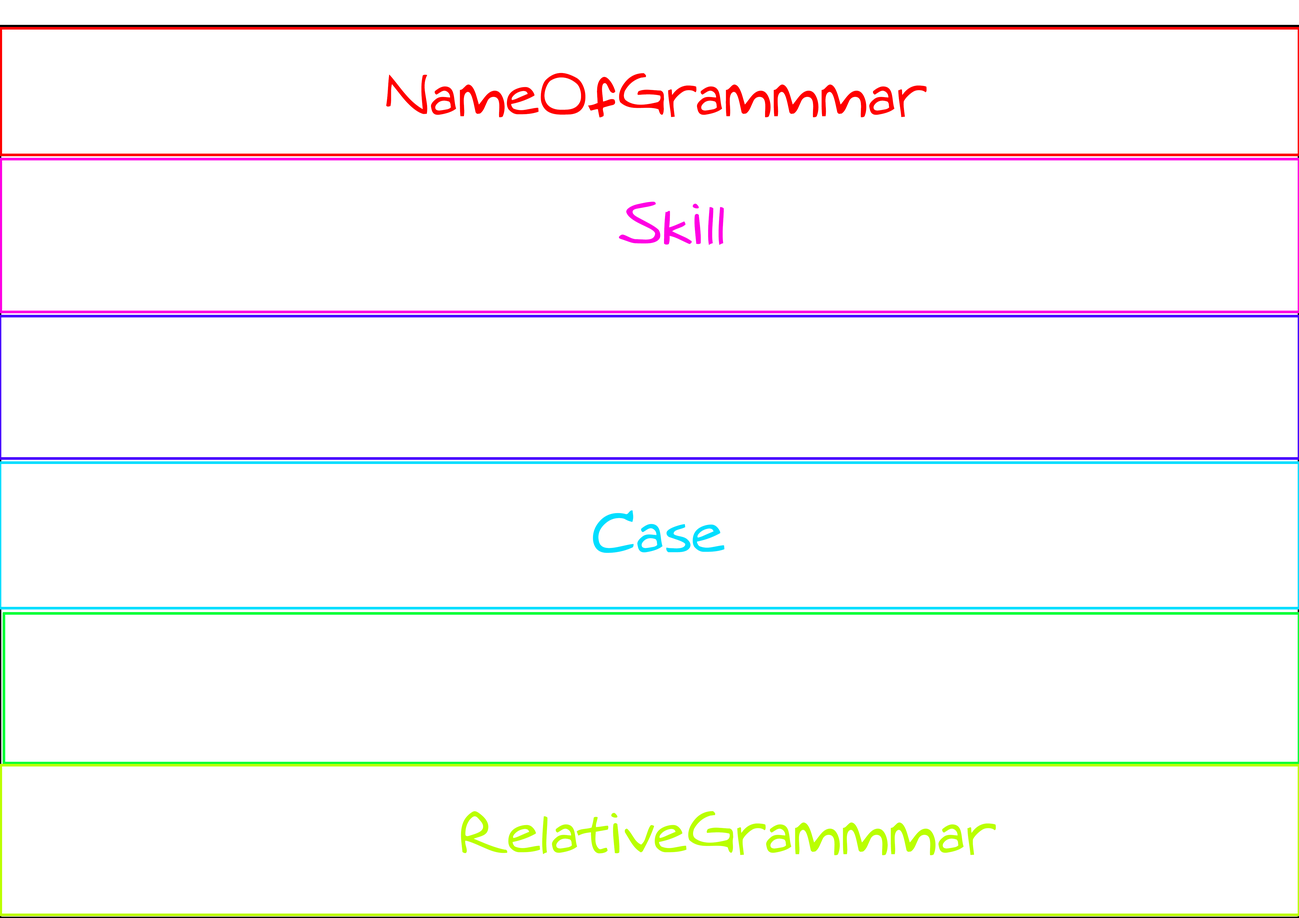
<style>
.page{position:relative;width:1299px;height:918px;background:#ffffff}
.page>*{position:absolute;margin:0}
.t1{font:54.5px "MTOaugie-Regular";color:#ff0000}
.t2{font:54.5px "MTOaugie-Regular";color:#ff00e4}
.t3{font:54.5px "MTOaugie-Regular";color:#00deff}
.t4{font:54.5px "MTOaugie-Regular";color:#baff00}
</style>
<div class="page">
<p class="t1" style="left:386px;top:73px;width:540px;height:45px">NameOfGrammmar</p>
<p class="t2" style="left:619px;top:202px;width:105px;height:43px">Skill</p>
<p class="t3" style="left:593px;top:510px;width:131px;height:43px">Case</p>
<p class="t4" style="left:461px;top:811px;width:534px;height:44px">RelativeGrammmar</p>
</div>
